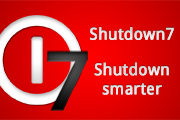
<style>
.page{position:relative;width:180px;height:120px}
.page>*{position:absolute;margin:0}
.t1{font:16px "DroidSans";color:#e5e5e5;font-weight:bold}
.t2{font:16px "DroidSans";color:#e6e6e6;font-weight:bold}
.t3{font:16px "DroidSans";color:#e4e4e4;font-weight:bold}
</style>
<div class="page">
<p class="t1" style="left:90px;top:27px;width:84px;height:13px">Shutdown7</p>
<p class="t2" style="left:90px;top:27px;width:84px;height:13px">Shutdown7</p>
<p class="t3" style="left:94px;top:62px;width:75px;height:33px;text-align:center">Shutdown<br>smarter</p>
<p class="t1" style="left:94px;top:62px;width:75px;height:33px;text-align:center">Shutdown<br>smarter</p>
</div>
